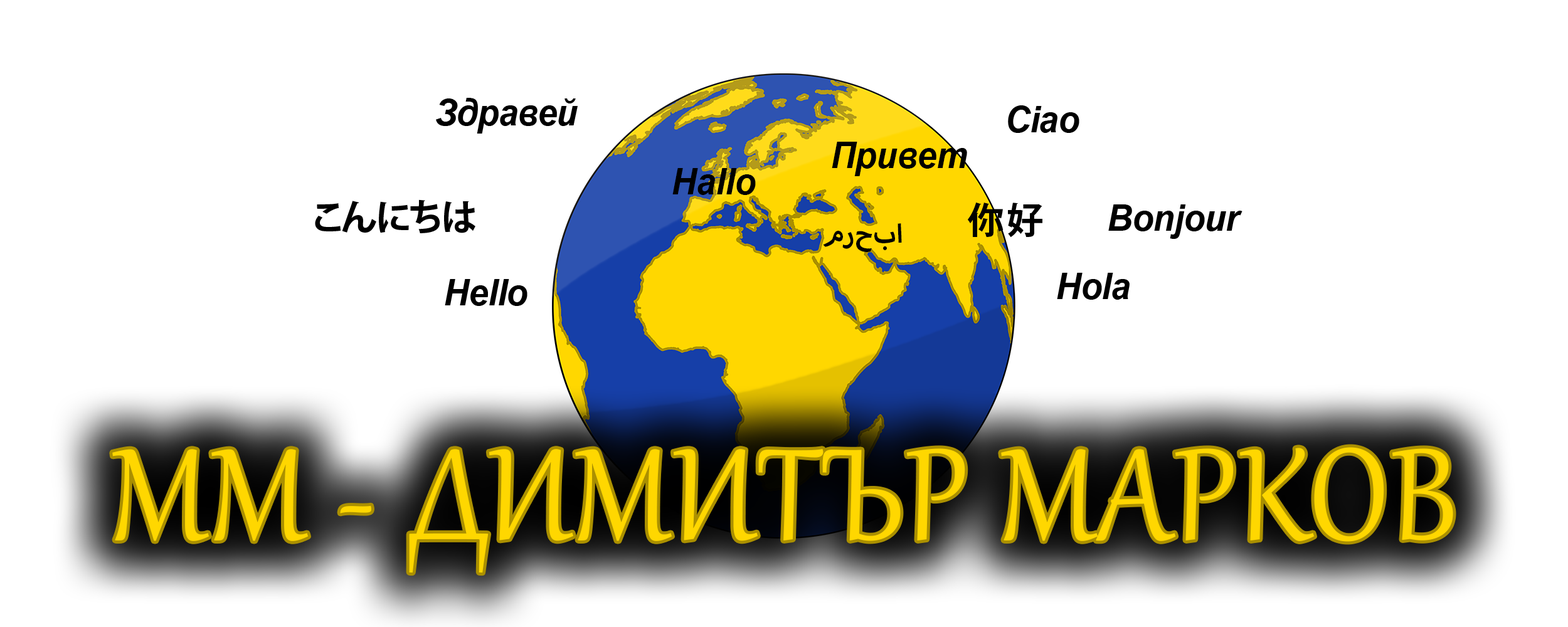
<style>
.page{position:relative;width:1568px;height:627px;background:#ffffff}
.page>*{position:absolute;margin:0}
.t1{font:36.8px "Arial-BoldItalicMT";letter-spacing:-0.01em;color:#000000;scale:0.95 1}
.t2{font:36.8px "KozGoPr6N-Bold";letter-spacing:-0.02em;color:#000000}
.t3{font:36.8px "KozGoPr6N-Bold";letter-spacing:0.07em;color:#000000}
.t4{font:36.8px "MyriadArabic-Bold";color:#000000}
.t5{font:159.9px "Gabriola";letter-spacing:0.02em;color:#ffd700;scale:0.93 1}
</style>
<div class="page">
<p class="t1" style="left:436px;top:98px;width:142px;height:36px">Здравей</p>
<p class="t1" style="left:1008px;top:105px;width:71px;height:28px">Ciao</p>
<p class="t1" style="left:832px;top:142px;width:135px;height:34px">Привет</p>
<p class="t1" style="left:672px;top:168px;width:84px;height:27px">Hallo</p>
<p class="t2" style="left:315px;top:199px;width:160px;height:34px">こんにちは</p>
<p class="t3" style="left:967px;top:202px;width:75px;height:36px">你好</p>
<p class="t1" style="left:1108px;top:204px;width:134px;height:35px">Bonjour</p>
<p class="t4" style="left:823px;top:223px;width:79px;height:29px">مرحبا</p>
<p class="t1" style="left:445px;top:279px;width:82px;height:27px">Hello</p>
<p class="t1" style="left:1057px;top:273px;width:73px;height:27px">Hola</p>
<p class="t5" style="left:112px;top:447px;width:1341px;height:126px">ММ - ДИМИТЪР МАРКОВ</p>
</div>
